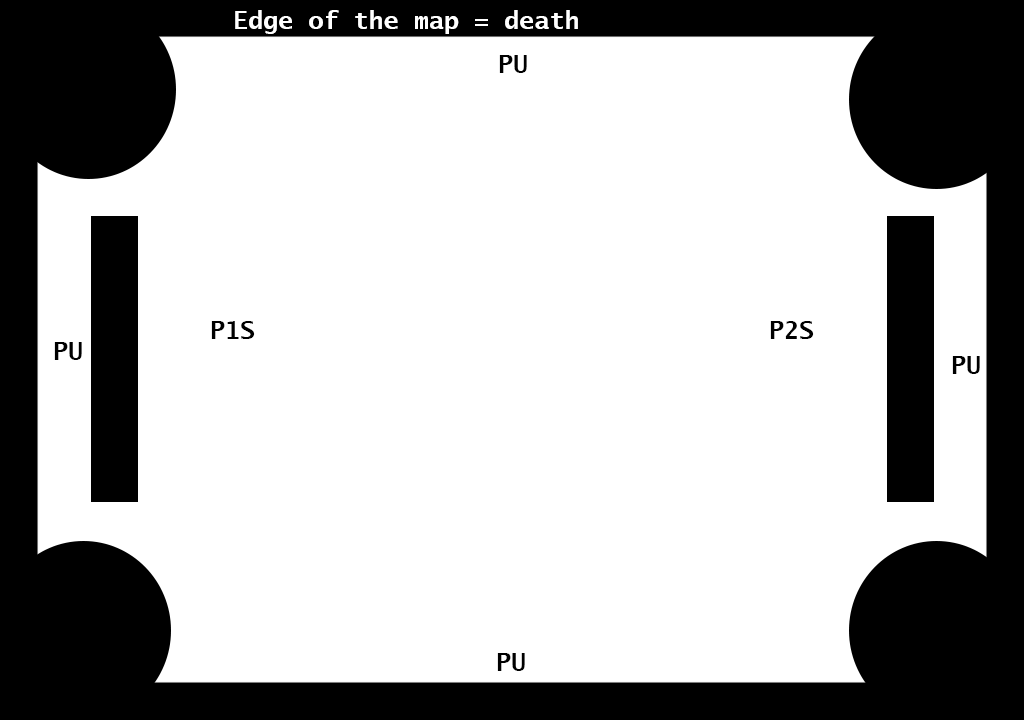
<style>
.page{position:relative;width:1024px;height:720px;background:#ffffff}
.page>*{position:absolute;margin:0}
.t1{font:25px "LucidaSans-TypewriterBold";color:#ffffff}
.t2{font:25px "LucidaSans-TypewriterBold";color:#000000}
</style>
<div class="page">
<p class="t1" style="left:235px;top:10px;width:343px;height:24px">Edge of the map = death</p>
<p class="t2" style="left:499px;top:55px;width:28px;height:18px">PU</p>
<p class="t2" style="left:211px;top:321px;width:44px;height:18px">P1S</p>
<p class="t2" style="left:770px;top:321px;width:44px;height:18px">P2S</p>
<p class="t2" style="left:54px;top:342px;width:28px;height:18px">PU</p>
<p class="t2" style="left:952px;top:356px;width:28px;height:18px">PU</p>
<p class="t2" style="left:497px;top:653px;width:28px;height:18px">PU</p>
</div>
